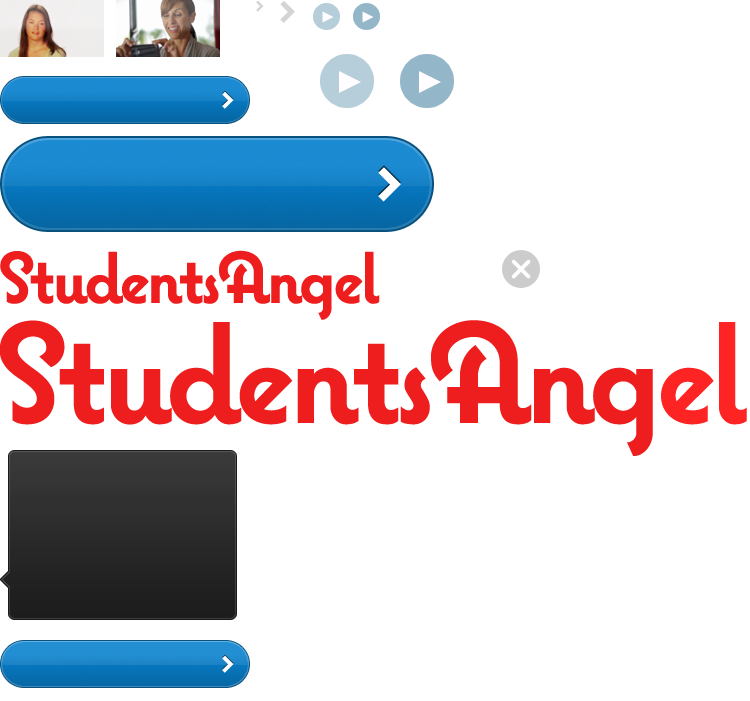
<style>
.page{position:relative;width:750px;height:701px;background:#ffffff}
.page>*{position:absolute;margin:0}
.t1{font:72px "CoquetteBold";letter-spacing:-0.05em;color:#ef1e1e}
.t2{font:142px "CoquetteBold";letter-spacing:-0.05em;color:#ef1e1e}
.t3{font:142px "CoquetteBold";letter-spacing:-0.05em;color:#ff2424}
</style>
<div class="page">
<p class="t1" style="left:0px;top:250px;width:380px;height:70px">StudentsAngel</p>
<p class="t2" style="left:0px;top:320px;width:747px;height:136px">StudentsAng<span class="t3">el</span></p>
</div>
